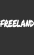
<style>
.page{position:relative;width:34px;height:55px;background:#333333}
.page>*{position:absolute;margin:0}
.t1{font:10.1px "PermanentMarker";color:#ffffff;scale:0.66 1}
</style>
<div class="page">
<p class="t1" style="left:0px;top:19px;width:34px;height:9px">FREELAND</p>
</div>
